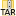
<style>
.page{position:relative;width:16px;height:16px;background:#ffffff}
.page>*{position:absolute;margin:0}
.t1{font:10px "Calibri";color:#1f1d18}
</style>
<div class="page">
<p class="t1" style="left:0px;top:9px;width:16px;height:6px">TAR</p>
</div>
